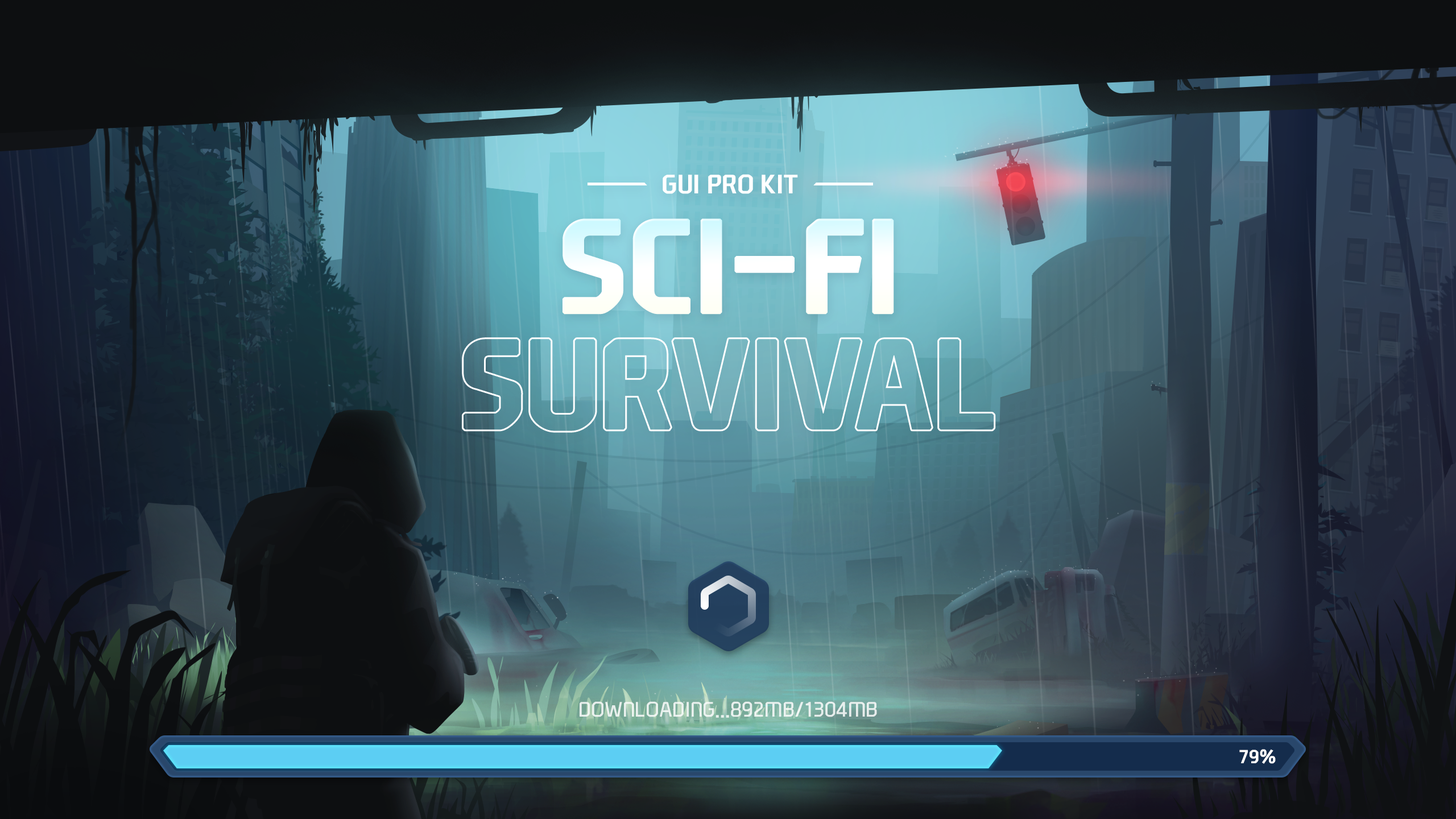
<style>
.page{position:relative;width:1456px;height:819px}
.page>*{position:absolute;margin:0}
.t1{font:25.6px "NEXONFootballGothicB";color:#ffffff;text-transform:uppercase}
.t2{font:20.5px "NEXONFootballGothicL";color:#ffffff;text-transform:uppercase}
.t3{font:18.2px "NEXONFootballGothicB";color:#ffffff;text-transform:uppercase}
</style>
<div class="page">
<p class="t1" style="left:663px;top:174px;width:135px;height:20px">GUI PRO KIT</p>
<p class="t2" style="left:580px;top:701px;width:297px;height:17px;opacity:0.8">Downloading...892MB/1304MB</p>
<p class="t3" style="left:1239px;top:749px;width:37px;height:15px">79%</p>
</div>
